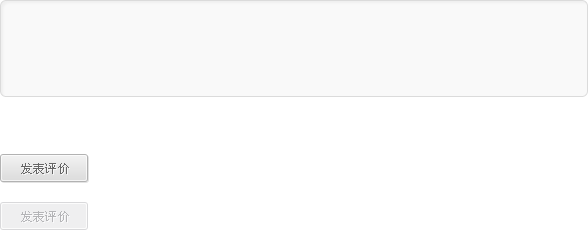
<style>
.page{position:relative;width:588px;height:230px;background:#ffffff}
.page>*{position:absolute;margin:0}
.t1{font:12px "SimSun";letter-spacing:0.02em;color:#b5b5b8}
</style>
<div class="page">
<p class="t1" style="left:21px;top:211px;width:48px;height:11px">发表评价</p>
</div>
